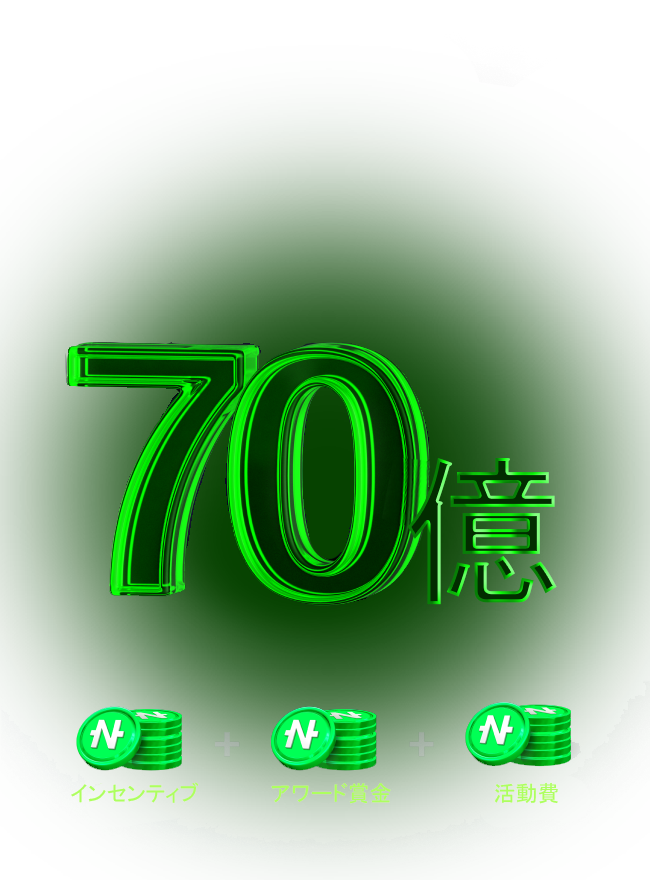
<style>
.page{position:relative;width:650px;height:880px}
.page>*{position:absolute;margin:0}
.t1{font:22px "MS-PGothic";color:#adff5f}
</style>
<div class="page">
<p class="t1" style="left:71px;top:782px;width:128px;height:21px">インセンティブ</p>
<p class="t1" style="left:271px;top:783px;width:120px;height:21px">アワード賞金</p>
<p class="t1" style="left:494px;top:782px;width:64px;height:22px">活動費</p>
</div>
